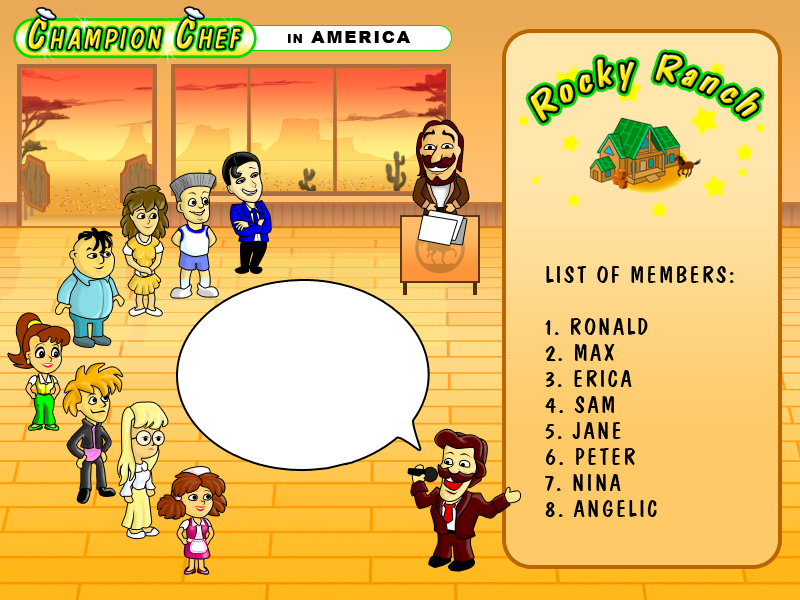
<style>
.page{position:relative;width:800px;height:600px}
.page>*{position:absolute;margin:0}
.t1{font:17.3px "Arial-Black";letter-spacing:0.09em;color:#000000;font-variant:small-caps}
.t2{font:24.1px/26px "DomCasualBT-Regular";letter-spacing:0.09em;color:#000000;font-variant:small-caps}
</style>
<div class="page">
<p class="t1" style="left:288px;top:31px;width:122px;height:12px">in AMERICA</p>
<p class="t2" style="left:545px;top:266px;width:189px;height:251px">LIST OF MEMBERS:<br><br>1. RONALD<br>2. MAX<br>3. ERICA<br>4. SAM<br>5. JANE<br>6. PETER<br>7. NINA<br>8. ANGELIC</p>
</div>
